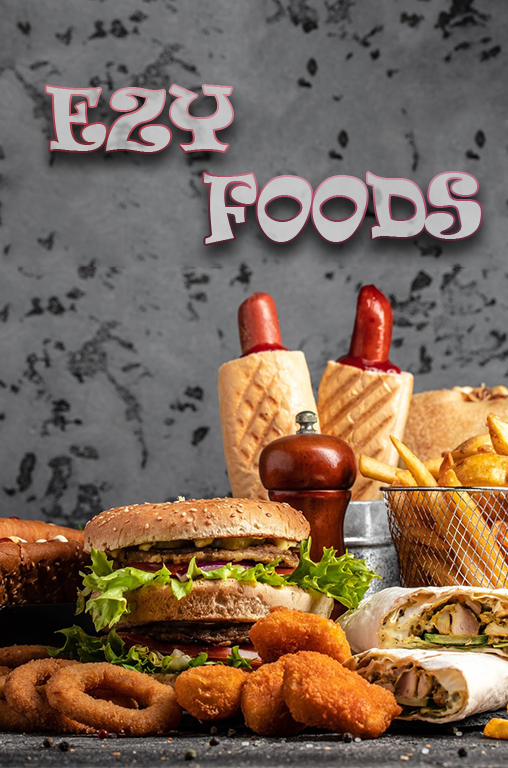
<style>
.page{position:relative;width:508px;height:768px}
.page>*{position:absolute;margin:0}
.t1{font:79.6px "Ravie";letter-spacing:-0.02em;color:#c1c1c1;scale:0.88 1}
.t2{font:79.6px "Ravie";letter-spacing:-0.02em;color:#c3c3c4;scale:0.88 1}
</style>
<div class="page">
<p class="t1" style="left:46px;top:86px;width:186px;height:66px">EZY</p>
<p class="t2" style="left:203px;top:173px;width:278px;height:71px">FOODS</p>
</div>
